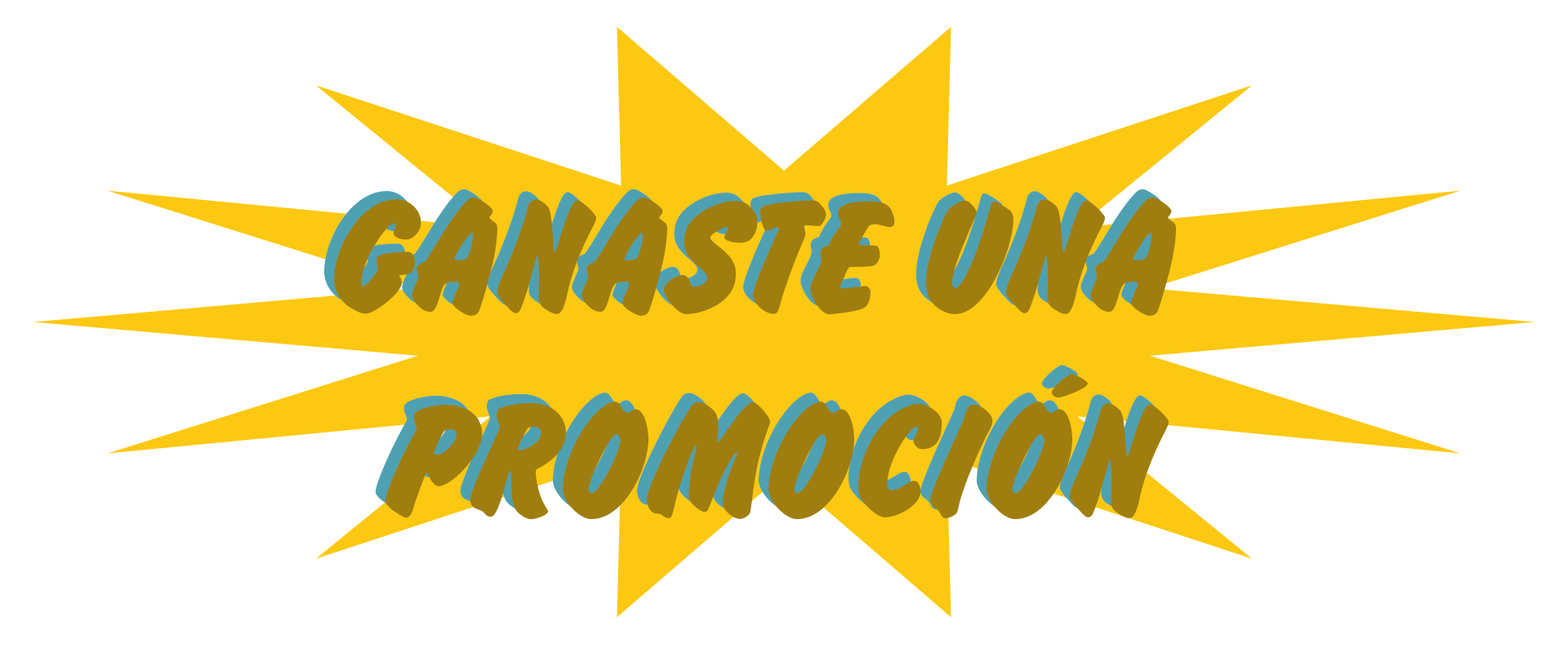
<style>
.page{position:relative;width:1568px;height:653px;background:#ffffff}
.page>*{position:absolute;margin:0}
.t1{font:169.8px "BrushHandNew"}
.t2{font:169.8px "BrushHandNew";color:#9f7e0f}
</style>
<div class="page">
<p class="t1" style="left:324px;top:189px;width:842px;height:322px;text-align:center">GANASTE UNA <br>PROMOCIÓN</p>
<p class="t2" style="left:334px;top:197px;width:842px;height:323px;text-align:center">GANASTE UNA <br>PROMOCIÓN</p>
</div>
